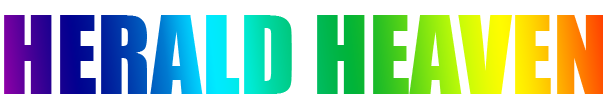
<style>
.page{position:relative;width:607px;height:109px;background:#ffffff}
.page>*{position:absolute;margin:0}
.t1{font:100px "Impact"}
</style>
<div class="page">
<p class="t1" style="left:4px;top:15px;width:599px;height:79px">HERALD HEAVEN</p>
</div>
